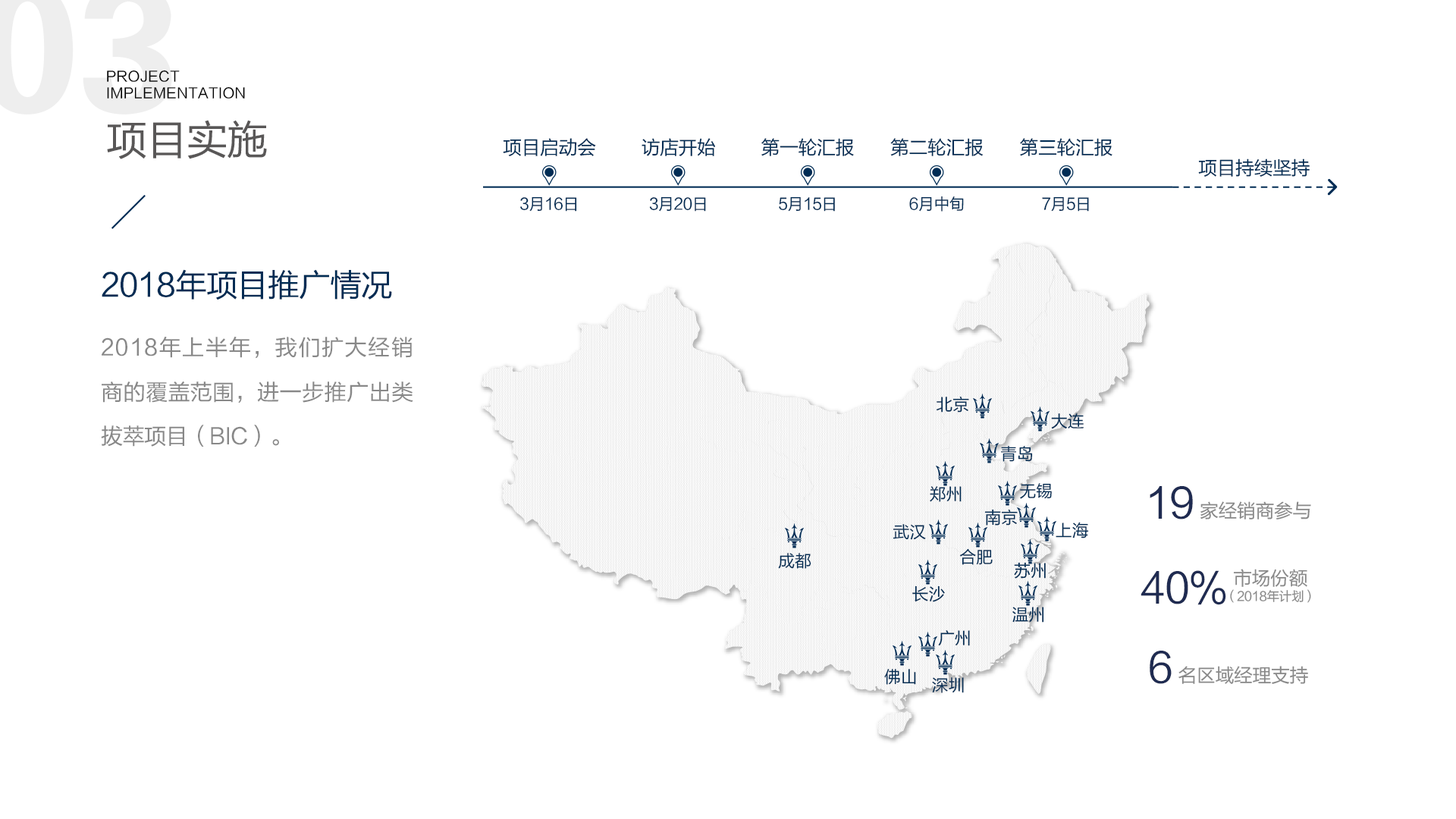
<style>
.page{position:relative;width:1456px;height:819px;background:#ffffff}
.page>*{position:absolute;margin:0}
.t1{font:14.1px "FZLTHJW--GB1-0";letter-spacing:0.02em;color:#000000}
.t2{font:41.1px "FZLTHJW--GB1-0";letter-spacing:-0.02em;color:#595757}
.t3{font:19px "FZLTHJW--GB1-0";letter-spacing:-0.02em;color:#002c54}
.t4{font:15.8px "FZLTHJW--GB1-0";letter-spacing:-0.02em;color:#002c54}
.t5{font:31.6px "FZLTHJW--GB1-0";letter-spacing:-0.02em;color:#002c54}
.t6{font:22.1px/44.2px "FZLTHJW--GB1-0";letter-spacing:-0.02em;color:#888888}
.t7{font:16.7px "FZLTHJW--GB1-0";color:#002c54}
.t8{font:41.1px "FZLTHJW--GB1-0";letter-spacing:-0.02em;color:#1f2b51}
.t9{font:19px "FZLTHJW--GB1-0";letter-spacing:-0.02em;color:#888888}
.t10{font:12.6px/15.8px "FZLTHJW--GB1-0";letter-spacing:-0.02em;color:#888888}
.t11{font:19px/15.8px "FZLTHJW--GB1-0";letter-spacing:-0.02em;color:#888888}
</style>
<div class="page">
<p class="t1" style="left:107px;top:70px;width:138px;height:29px">PROJECT <br>IMPLEMENTATION</p>
<p class="t2" style="left:107px;top:120px;width:160px;height:39px">项目实施</p>
<p class="t3" style="left:503px;top:138px;width:93px;height:18px">项目启动会</p>
<p class="t3" style="left:642px;top:138px;width:74px;height:18px">访店开始</p>
<p class="t3" style="left:761px;top:138px;width:93px;height:18px">第一轮汇报</p>
<p class="t3" style="left:890px;top:138px;width:94px;height:18px">第二轮汇报</p>
<p class="t3" style="left:1020px;top:138px;width:92px;height:18px">第三轮汇报</p>
<p class="t3" style="left:1198px;top:158px;width:112px;height:19px">项目持续坚持</p>
<p class="t4" style="left:520px;top:196px;width:57px;height:16px">3月16日</p>
<p class="t4" style="left:649px;top:196px;width:57px;height:16px">3月20日</p>
<p class="t4" style="left:779px;top:196px;width:56px;height:16px">5月15日</p>
<p class="t4" style="left:909px;top:196px;width:55px;height:16px">6月中旬</p>
<p class="t4" style="left:1042px;top:196px;width:47px;height:16px">7月5日</p>
<p class="t5" style="left:102px;top:269px;width:290px;height:31px">2018年项目推广情况</p>
<p class="t6" style="left:101px;top:337px;width:312px;height:110px;text-align:justify">2018年上半年，我们扩大经销商的覆盖范围，进一步推广出类拔萃项目（BIC）。</p>
<p class="t7" style="left:937px;top:396px;width:32px;height:17px">北京</p>
<p class="t7" style="left:1051px;top:413px;width:33px;height:16px">大连</p>
<p class="t7" style="left:1001px;top:446px;width:32px;height:16px">青岛</p>
<p class="t7" style="left:1020px;top:483px;width:32px;height:16px">无锡</p>
<p class="t7" style="left:930px;top:486px;width:32px;height:16px">郑州</p>
<p class="t8" style="left:1150px;top:486px;width:43px;height:33px">19</p>
<p class="t7" style="left:984px;top:509px;width:34px;height:17px">南京</p>
<p class="t9" style="left:1200px;top:501px;width:111px;height:18px">家经销商参与</p>
<p class="t7" style="left:1056px;top:522px;width:33px;height:16px">上海</p>
<p class="t7" style="left:893px;top:524px;width:33px;height:16px">武汉</p>
<p class="t7" style="left:778px;top:553px;width:33px;height:16px">成都</p>
<p class="t7" style="left:959px;top:548px;width:34px;height:17px">合肥</p>
<p class="t7" style="left:1014px;top:562px;width:32px;height:17px">苏州</p>
<p class="t10" style="left:1230px;top:569px;width:81px;height:34px;text-align:center"><span class="t11">市场份额<br></span>（2018年计划）</p>
<p class="t8" style="left:1141px;top:570px;width:85px;height:35px">40%</p>
<p class="t7" style="left:912px;top:585px;width:33px;height:17px">长沙</p>
<p class="t7" style="left:1012px;top:607px;width:32px;height:16px">温州</p>
<p class="t7" style="left:938px;top:630px;width:32px;height:16px">广州</p>
<p class="t8" style="left:1150px;top:651px;width:22px;height:33px">6</p>
<p class="t9" style="left:1178px;top:666px;width:130px;height:18px">名区域经理支持</p>
<p class="t7" style="left:884px;top:669px;width:32px;height:16px">佛山</p>
<p class="t7" style="left:932px;top:677px;width:32px;height:16px">深圳</p>
</div>
